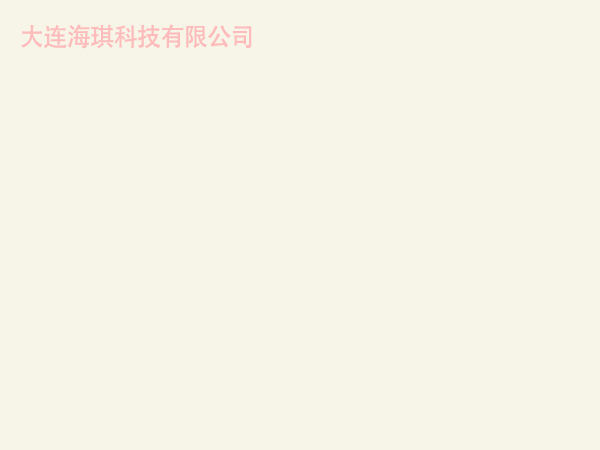
<style>
.page{position:relative;width:600px;height:450px;background:#f7f5e7}
.page>*{position:absolute;margin:0}
.t1{font:25.2px "AdobeHeitiStd-Regular";letter-spacing:-0.025em;color:#fdbcbb;scale:0.95 1}
</style>
<div class="page">
<p class="t1" style="left:21px;top:24px;width:231px;height:25px">大连海琪科技有限公司</p>
</div>
